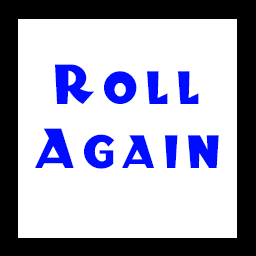
<style>
.page{position:relative;width:256px;height:256px;background:#ffffff}
.page>*{position:absolute;margin:0}
.t1{font:53.1px "BlitzkriegNF";letter-spacing:0.159em;color:#000cff}
</style>
<div class="page">
<p class="t1" style="left:35px;top:64px;width:184px;height:105px;text-align:center">Roll<br>Again</p>
</div>
